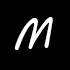
<style>
.page{position:relative;width:70px;height:70px;background:#000000}
.page>*{position:absolute;margin:0}
.t1{font:41.7px "MVBoli";color:#ffffff}
</style>
<div class="page">
<p class="t1" style="left:14px;top:17px;width:39px;height:33px">M</p>
</div>
